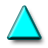
<style>
.page{position:relative;width:48px;height:48px;background:#ffffff}
.page>*{position:absolute;margin:0}
.t1{font:45px "ArialMT"}
</style>
<div class="page">
<p class="t1" style="left:8px;top:7px;width:32px;height:31px">▲</p>
</div>
